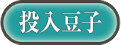
<style>
.page{position:relative;width:121px;height:45px}
.page>*{position:absolute;margin:0}
.t1{font:24px "RyuminPr6N-ExBold";color:#fdfbf9;scale:0.9 1}
</style>
<div class="page">
<p class="t1" style="left:19px;top:10px;width:83px;height:24px">投入豆子</p>
</div>
